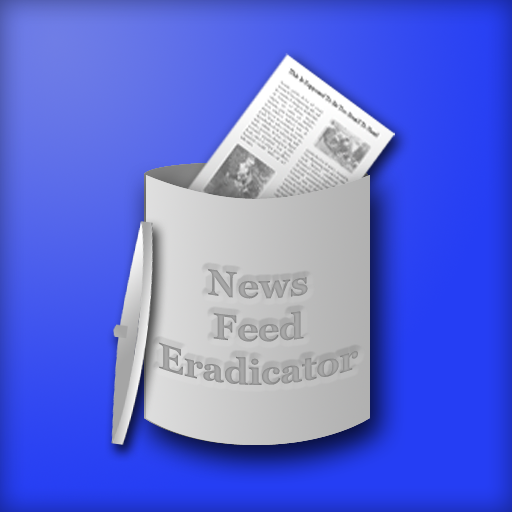
<style>
.page{position:relative;width:512px;height:512px}
.page>*{position:absolute;margin:0}
.t1{font:36px "Georgia-Bold";color:#a8a8a8}
</style>
<div class="page">
<p class="t1" style="left:159px;top:269px;width:199px;height:116px;text-align:center">News<br>Feed<br>Eradicator</p>
</div>
